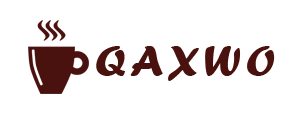
<style>
.page{position:relative;width:300px;height:120px;background:#ffffff}
.page>*{position:absolute;margin:0}
.t1{font:45px "ForteMT";letter-spacing:0.1em;color:#4a120f}
</style>
<div class="page">
<p class="t1" style="left:96px;top:46px;width:179px;height:35px">QAXWO</p>
</div>
